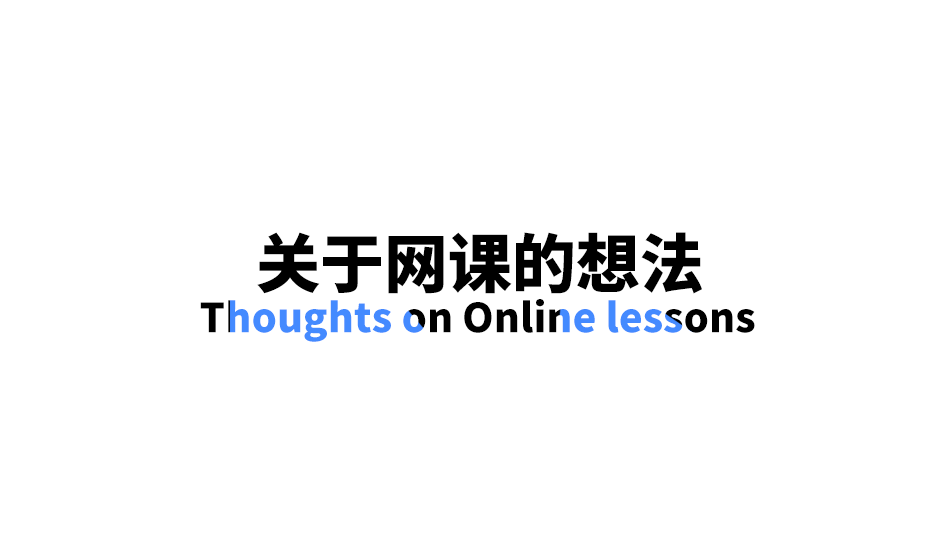
<style>
.page{position:relative;width:945px;height:553px;background:#ffffff}
.page>*{position:absolute;margin:0}
.t1{font:64px "SourceHanSansCN-Heavy";color:#000000}
.t2{font:40px "SourceHanSansCN-Heavy"}
</style>
<div class="page">
<p class="t1" style="left:257px;top:232px;width:445px;height:62px">关于网课的想法</p>
<p class="t2" style="left:200px;top:299px;width:555px;height:43px">Thoughts on Online lessons</p>
</div>
